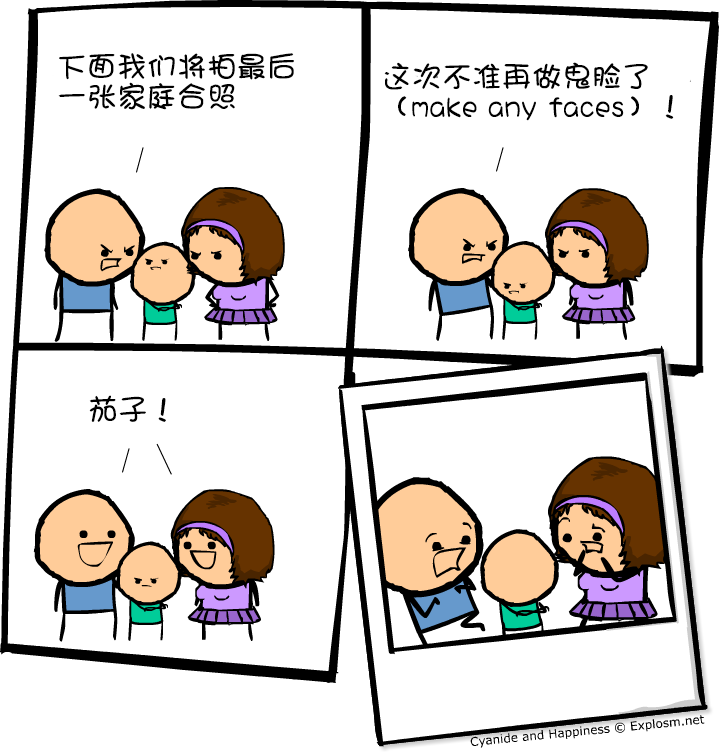
<style>
.page{position:relative;width:719px;height:755px;background:#ffffff}
.page>*{position:absolute;margin:0}
.t1{font:30px/30px "DFGirl";color:#000000}
.t2{font:30px "DFGirl";color:#000000}
</style>
<div class="page">
<p class="t1" style="left:58px;top:53px;width:236px;height:57px">下面我们将拍最后<br>一张家庭合照</p>
<p class="t1" style="left:384px;top:62px;width:290px;height:59px">这次不准再做鬼脸了<br>（make any faces）！</p>
<p class="t2" style="left:89px;top:395px;width:77px;height:27px">茄子！</p>
</div>
